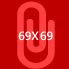
<style>
.page{position:relative;width:69px;height:69px;background:#bf0000}
.page>*{position:absolute;margin:0}
.t1{font:12px "SegoeWP-Semibold";letter-spacing:0.025em;color:#ffffff;text-transform:uppercase}
</style>
<div class="page">
<p class="t1" style="left:18px;top:31px;width:35px;height:10px">69x69</p>
</div>
